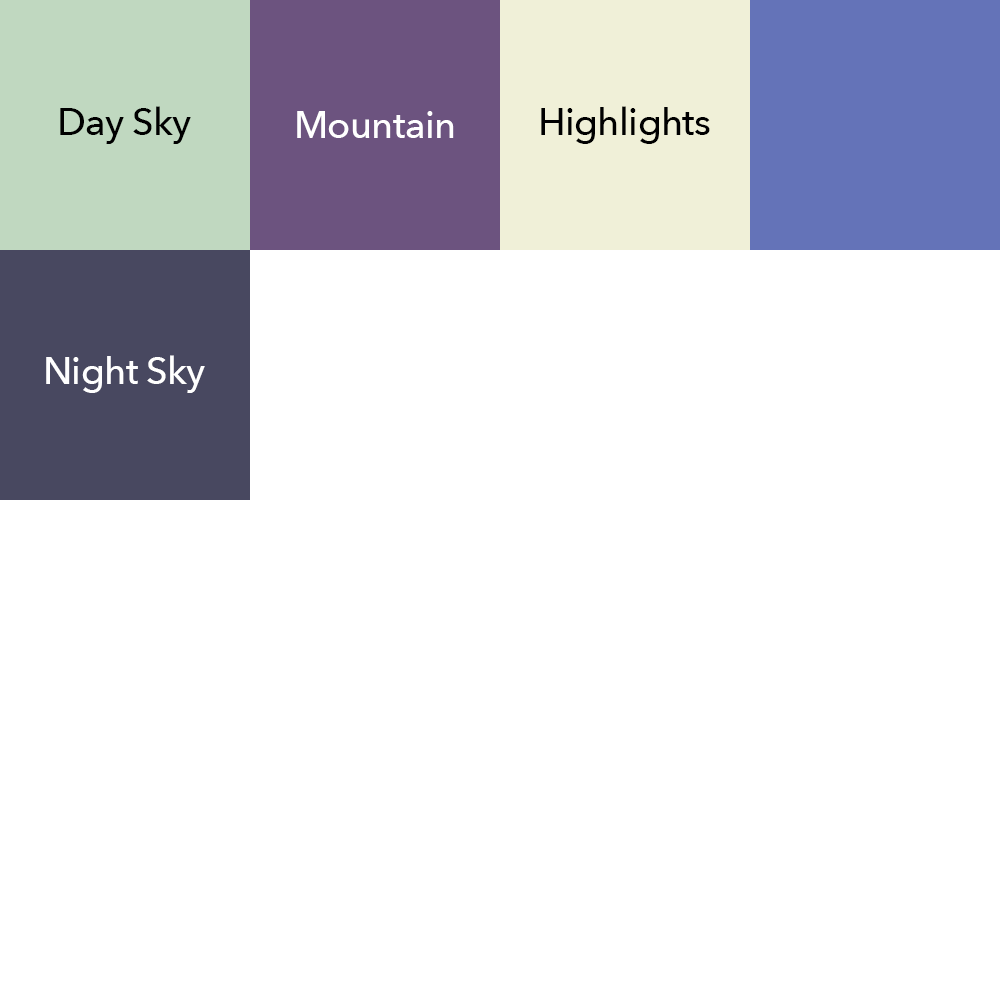
<style>
.page{position:relative;width:1000px;height:1000px;background:#ffffff}
.page>*{position:absolute;margin:0}
.t1{font:37.5px "AvenirNext-Medium";letter-spacing:-0.01em;color:#000000}
.t2{font:37.5px "AvenirNext-Medium";letter-spacing:-0.01em;color:#ffffff}
</style>
<div class="page">
<p class="t1" style="left:60px;top:106px;width:131px;height:38px">Day Sky</p>
<p class="t2" style="left:297px;top:111px;width:157px;height:27px">Mountain</p>
<p class="t1" style="left:541px;top:106px;width:169px;height:38px">Highlights</p>
<p class="t2" style="left:46px;top:355px;width:159px;height:38px">Night Sky</p>
</div>
